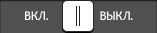
<style>
.page{position:relative;width:157px;height:33px;background:#505050}
.page>*{position:absolute;margin:0}
.t1{font:12px "TrebuchetMS";color:#ffffff}
</style>
<div class="page">
<p class="t1" style="left:25px;top:11px;width:23px;height:9px">ВКЛ.</p>
<p class="t1" style="left:100px;top:11px;width:33px;height:9px">ВЫКЛ.</p>
</div>
